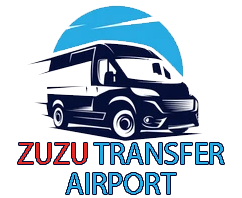
<style>
.page{position:relative;width:242px;height:198px;background:#ffffff}
.page>*{position:absolute;margin:0}
.t1{font:30px/30px "MyriadPro-Regular";color:#26abe2}
.t2{font:30px/30px "MyriadPro-Regular";color:#e22a26}
</style>
<div class="page">
<p class="t1" style="left:18px;top:143px;width:206px;height:51px;text-align:center"><span class="t2">ZUZU</span> TRANSFER<br>AIRPORT</p>
</div>
